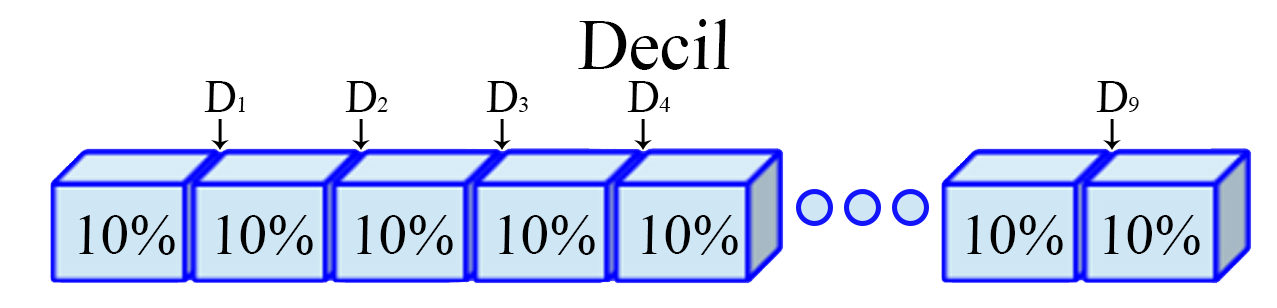
<style>
.page{position:relative;width:1277px;height:308px;background:#ffffff}
.page>*{position:absolute;margin:0}
.t1{font:71.6px "TimesNewRomanPSMT";color:#000000;font-style:italic}
.t2{font:45.4px "TimesNewRomanPSMT";color:#000000;font-style:italic}
.t3{font:22.8px "TimesNewRomanPSMT";color:#000000;font-style:italic}
.t4{font:57.5px "TimesNewRomanPSMT";color:#000000;font-style:italic}
</style>
<div class="page">
<p class="t1" style="left:578px;top:19px;width:152px;height:51px">Decil</p>
<p class="t2" style="left:204px;top:81px;width:41px;height:31px">D<span class="t3">1</span></p>
<p class="t2" style="left:345px;top:81px;width:43px;height:31px">D<span class="t3">2</span></p>
<p class="t2" style="left:486px;top:81px;width:42px;height:31px">D<span class="t3">3</span></p>
<p class="t2" style="left:627px;top:81px;width:44px;height:31px">D<span class="t3">4</span></p>
<p class="t2" style="left:1096px;top:81px;width:43px;height:31px">D<span class="t3">9</span></p>
<p class="t4" style="left:79px;top:215px;width:96px;height:40px">10%</p>
<p class="t4" style="left:217px;top:215px;width:96px;height:40px">10%</p>
<p class="t4" style="left:357px;top:215px;width:96px;height:40px">10%</p>
<p class="t4" style="left:499px;top:215px;width:96px;height:40px">10%</p>
<p class="t4" style="left:642px;top:215px;width:96px;height:40px">10%</p>
<p class="t4" style="left:967px;top:215px;width:96px;height:40px">10%</p>
<p class="t4" style="left:1104px;top:215px;width:96px;height:40px">10%</p>
</div>
